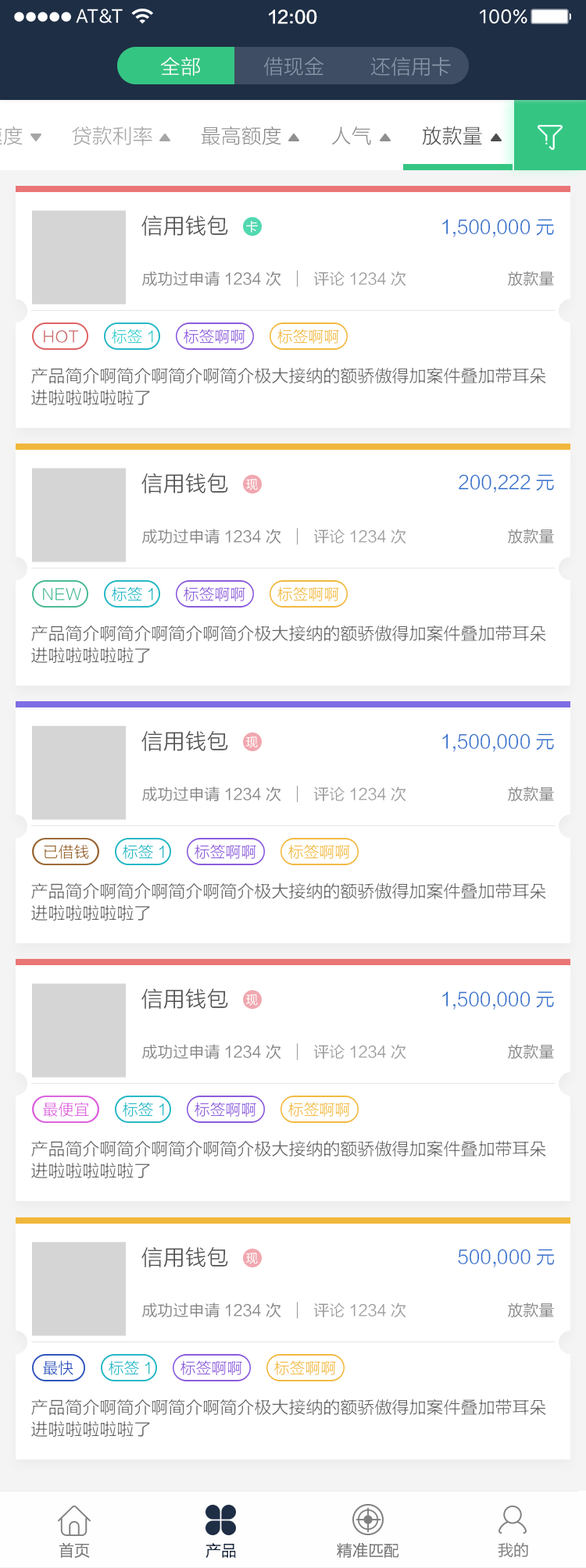
<style>
.page{position:relative;width:586px;height:1568px;background:#ffffff}
.page>*{position:absolute;margin:0}
.t1{font:17.2px "FZLTZHK--GBK1-0";color:#ffffff}
.t2{font:20.3px "FZLTXHK";color:#ffffff}
.t3{font:20.3px "FZLTXHK";color:#8895a8}
.t4{font:20.3px "FZLTXHK";color:#a6a6a6}
.t5{font:20.3px "FZLTXHK";color:#8f8f8f}
.t6{font:20.3px "FZLTXHK";color:#4d4d4d}
.t7{font:21.9px "FZLTXHK";color:#4d4d4d}
.t8{font:12.5px "FZLTXHK";color:#ffffff}
.t9{font:18.7px "FZLTXHK";color:#3170cc}
.t10{font:15.6px "FZLTXHK";color:#808080}
.t11{font:15.6px "FZLTXHK";color:#999999}
.t12{font:15.6px "FZLTXHK";color:#33cccc}
.t13{font:15.6px "FZLTXHK";color:#8857db}
.t14{font:15.6px "FZLTXHK";color:#f1b73c}
.t15{font:15.6px "FZLTXHK";color:#cc6666}
.t16{font:17.2px/21.9px "FZLTXHK";color:#666666}
.t17{font:15.6px "FZLTXHK";color:#45b991}
.t18{font:15.6px "FZLTXHK";color:#21b5c3}
.t19{font:15.6px "FZLTXHK";color:#996633}
.t20{font:15.6px "FZLTXHK";color:#db5edc}
.t21{font:15.6px "FZLTXHK";color:#294fbb}
.t22{font:15.6px "FZLTXHK";color:#1e2e45}
.t23{font:15.6px "FZLTHK--GBK1-0";color:#808080}
</style>
<div class="page">
<p class="t1" style="left:269px;top:9px;width:48px;height:15px">12:00</p>
<p class="t2" style="left:161px;top:57px;width:39px;height:19px">全部</p>
<p class="t3" style="left:263px;top:57px;width:60px;height:19px">借现金</p>
<p class="t3" style="left:371px;top:57px;width:80px;height:19px">还信用卡</p>
<p class="t4" style="left:72px;top:126px;width:80px;height:20px">贷款利率</p>
<p class="t5" style="left:201px;top:126px;width:80px;height:19px">最高额度</p>
<p class="t6" style="left:422px;top:126px;width:60px;height:19px">放款量</p>
<p class="t5" style="left:332px;top:127px;width:39px;height:18px">人气</p>
<p class="t7" style="left:141px;top:216px;width:87px;height:20px">信用钱包</p>
<p class="t8" style="left:246px;top:220px;width:12px;height:13px">卡</p>
<p class="t9" style="left:442px;top:219px;width:112px;height:18px">1,500,000元</p>
<p class="t10" style="left:142px;top:271px;width:139px;height:16px">成功过申请1234次</p>
<p class="t11" style="left:313px;top:271px;width:93px;height:15px">评论1234次</p>
<p class="t10" style="left:508px;top:271px;width:46px;height:15px">放款量</p>
<p class="t12" style="left:112px;top:329px;width:41px;height:15px">标签1</p>
<p class="t13" style="left:184px;top:329px;width:61px;height:15px">标签啊啊</p>
<p class="t14" style="left:277px;top:329px;width:62px;height:15px">标签啊啊</p>
<p class="t15" style="left:44px;top:330px;width:35px;height:13px">HOT</p>
<p class="t16" style="left:31px;top:367px;width:515px;height:38px">产品简介啊简介啊简介啊简介极大接纳的额骄傲得加案件叠加带耳朵<br>进啦啦啦啦啦了</p>
<p class="t7" style="left:141px;top:473px;width:87px;height:21px">信用钱包</p>
<p class="t9" style="left:458px;top:474px;width:96px;height:19px">200,222元</p>
<p class="t8" style="left:246px;top:479px;width:12px;height:11px">现</p>
<p class="t10" style="left:142px;top:529px;width:139px;height:15px">成功过申请1234次</p>
<p class="t11" style="left:313px;top:529px;width:93px;height:14px">评论1234次</p>
<p class="t10" style="left:508px;top:529px;width:46px;height:14px">放款量</p>
<p class="t17" style="left:43px;top:588px;width:38px;height:12px">NEW</p>
<p class="t18" style="left:112px;top:586px;width:41px;height:15px">标签1</p>
<p class="t13" style="left:184px;top:586px;width:61px;height:15px">标签啊啊</p>
<p class="t14" style="left:277px;top:586px;width:62px;height:15px">标签啊啊</p>
<p class="t16" style="left:31px;top:625px;width:515px;height:38px">产品简介啊简介啊简介啊简介极大接纳的额骄傲得加案件叠加带耳朵<br>进啦啦啦啦啦了</p>
<p class="t7" style="left:141px;top:731px;width:87px;height:20px">信用钱包</p>
<p class="t8" style="left:246px;top:736px;width:12px;height:12px">现</p>
<p class="t9" style="left:442px;top:733px;width:112px;height:19px">1,500,000元</p>
<p class="t10" style="left:142px;top:786px;width:139px;height:16px">成功过申请1234次</p>
<p class="t11" style="left:313px;top:786px;width:93px;height:15px">评论1234次</p>
<p class="t10" style="left:508px;top:786px;width:46px;height:15px">放款量</p>
<p class="t19" style="left:44px;top:844px;width:45px;height:15px">已借钱</p>
<p class="t18" style="left:123px;top:844px;width:41px;height:15px">标签1</p>
<p class="t13" style="left:194px;top:844px;width:62px;height:15px">标签啊啊</p>
<p class="t14" style="left:288px;top:844px;width:62px;height:15px">标签啊啊</p>
<p class="t16" style="left:31px;top:882px;width:515px;height:39px">产品简介啊简介啊简介啊简介极大接纳的额骄傲得加案件叠加带耳朵<br>进啦啦啦啦啦了</p>
<p class="t7" style="left:141px;top:989px;width:87px;height:20px">信用钱包</p>
<p class="t8" style="left:246px;top:994px;width:12px;height:12px">现</p>
<p class="t9" style="left:442px;top:991px;width:112px;height:19px">1,500,000元</p>
<p class="t10" style="left:142px;top:1044px;width:139px;height:16px">成功过申请1234次</p>
<p class="t11" style="left:313px;top:1044px;width:93px;height:15px">评论1234次</p>
<p class="t10" style="left:508px;top:1044px;width:46px;height:15px">放款量</p>
<p class="t20" style="left:43px;top:1102px;width:46px;height:15px">最便宜</p>
<p class="t18" style="left:123px;top:1102px;width:41px;height:15px">标签1</p>
<p class="t13" style="left:194px;top:1102px;width:62px;height:15px">标签啊啊</p>
<p class="t14" style="left:288px;top:1102px;width:62px;height:15px">标签啊啊</p>
<p class="t16" style="left:31px;top:1140px;width:515px;height:38px">产品简介啊简介啊简介啊简介极大接纳的额骄傲得加案件叠加带耳朵<br>进啦啦啦啦啦了</p>
<p class="t7" style="left:141px;top:1247px;width:87px;height:20px">信用钱包</p>
<p class="t8" style="left:246px;top:1253px;width:12px;height:11px">现</p>
<p class="t9" style="left:458px;top:1249px;width:96px;height:18px">500,000元</p>
<p class="t10" style="left:142px;top:1303px;width:139px;height:15px">成功过申请1234次</p>
<p class="t11" style="left:313px;top:1303px;width:93px;height:14px">评论1234次</p>
<p class="t10" style="left:508px;top:1303px;width:46px;height:14px">放款量</p>
<p class="t21" style="left:43px;top:1360px;width:30px;height:15px">最快</p>
<p class="t18" style="left:109px;top:1360px;width:41px;height:15px">标签1</p>
<p class="t13" style="left:180px;top:1360px;width:62px;height:15px">标签啊啊</p>
<p class="t14" style="left:274px;top:1360px;width:62px;height:15px">标签啊啊</p>
<p class="t16" style="left:31px;top:1399px;width:515px;height:38px">产品简介啊简介啊简介啊简介极大接纳的额骄傲得加案件叠加带耳朵<br>进啦啦啦啦啦了</p>
<p class="t10" style="left:59px;top:1542px;width:31px;height:16px">首页</p>
<p class="t22" style="left:205px;top:1543px;width:31px;height:15px">产品</p>
<p class="t10" style="left:337px;top:1543px;width:62px;height:15px">精准匹配</p>
<p class="t23" style="left:497px;top:1542px;width:31px;height:16px">我的</p>
</div>
